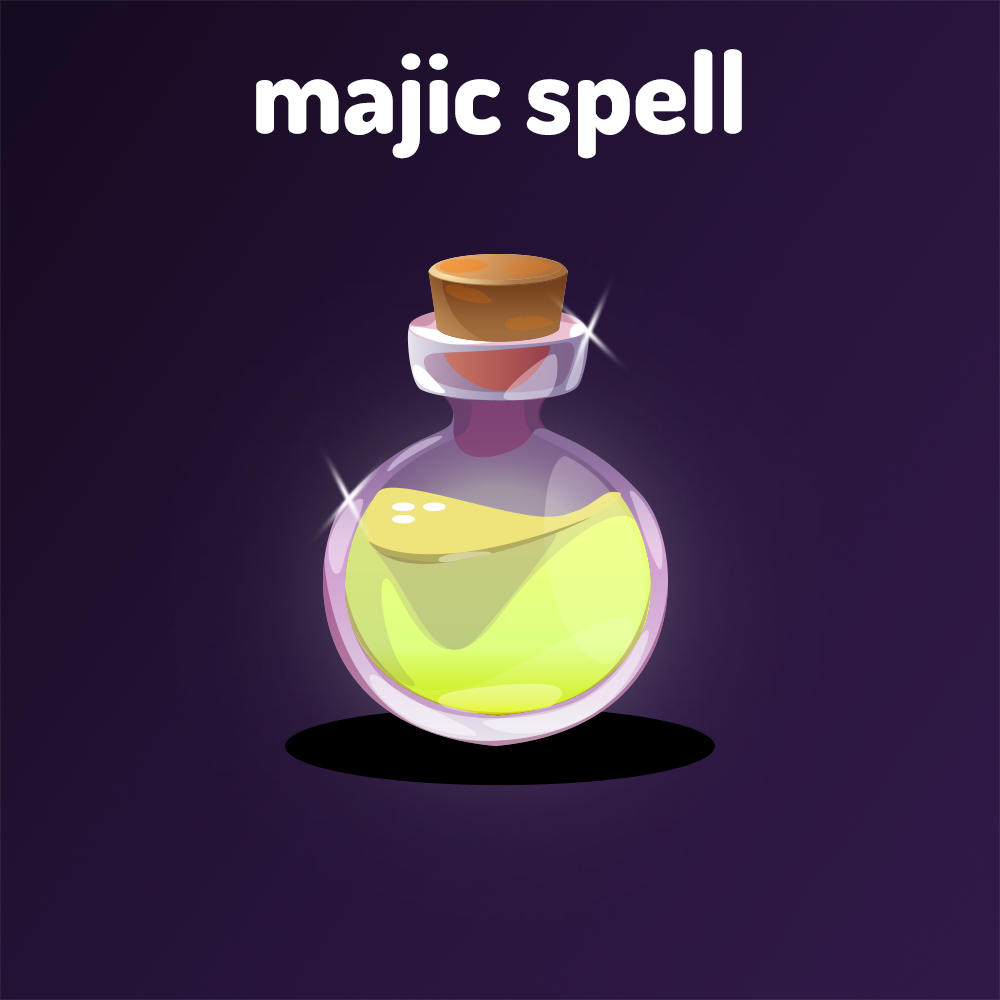
<style>
.page{position:relative;width:1000px;height:1000px}
.page>*{position:absolute;margin:0}
.t1{font:112.5px "Dosis-ExtraBold";color:#ffffff}
</style>
<div class="page">
<p class="t1" style="left:256px;top:49px;width:486px;height:110px">majic spell</p>
</div>
